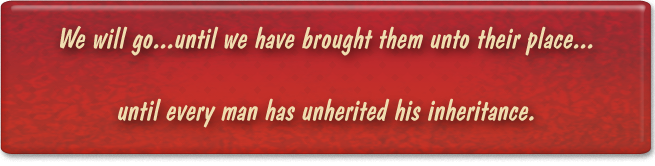
<style>
.page{position:relative;width:655px;height:166px}
.page>*{position:absolute;margin:0}
.t1{font:30px "DomDiagonalBT-Regular";color:#efddaf}
</style>
<div class="page">
<p class="t1" style="left:60px;top:26px;width:533px;height:102px;text-align:center">We will go...until we have brought them unto their place...<br><br>until every man has unherited his inheritance.</p>
</div>
